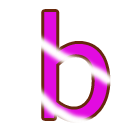
<style>
.page{position:relative;width:128px;height:128px;background:#ffffff}
.page>*{position:absolute;margin:0}
.t1{font:132.9px "SourceHanSansCN-Regular";color:#e20be0}
</style>
<div class="page">
<p class="t1" style="left:44px;top:12px;width:64px;height:108px">b</p>
</div>
